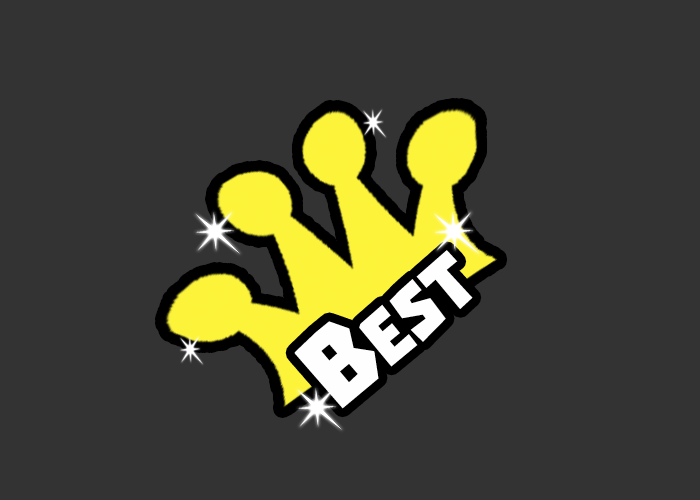
<style>
.page{position:relative;width:700px;height:500px;background:#333333}
.page>*{position:absolute;margin:0}
.t1{font:85.6px "Troika";color:#fffefe;text-transform:uppercase}
.t2{font:120px "Troika";color:#fffefe;text-transform:uppercase}
</style>
<div class="page">
<p class="t1" style="left:294px;top:250px;width:179px;height:159px;rotate:-40deg"><span class="t2">b</span>est</p>
</div>
